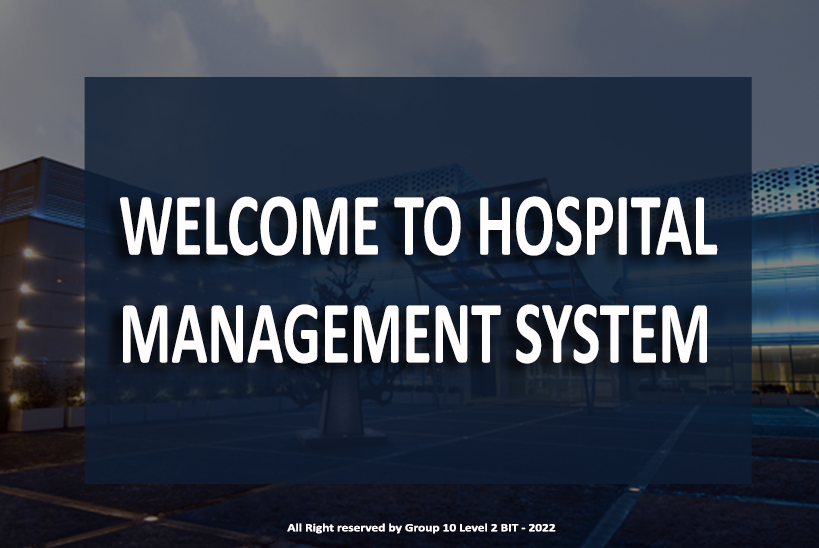
<style>
.page{position:relative;width:819px;height:548px}
.page>*{position:absolute;margin:0}
.t1{font:89.9px "Calibri-Bold";color:#fffdfd;scale:0.67 1}
.t2{font:11.3px "Calibri-Bold";color:#fffdfd;scale:1.19 1}
</style>
<div class="page">
<p class="t1" style="left:120px;top:196px;width:598px;height:168px;text-align:right">WELCOME TO HOSPITAL <br>MANAGEMENT SYSTEM</p>
<p class="t2" style="left:287px;top:523px;width:269px;height:11px">All Right reserved by Group 10 Level 2 BIT - 2022</p>
</div>
